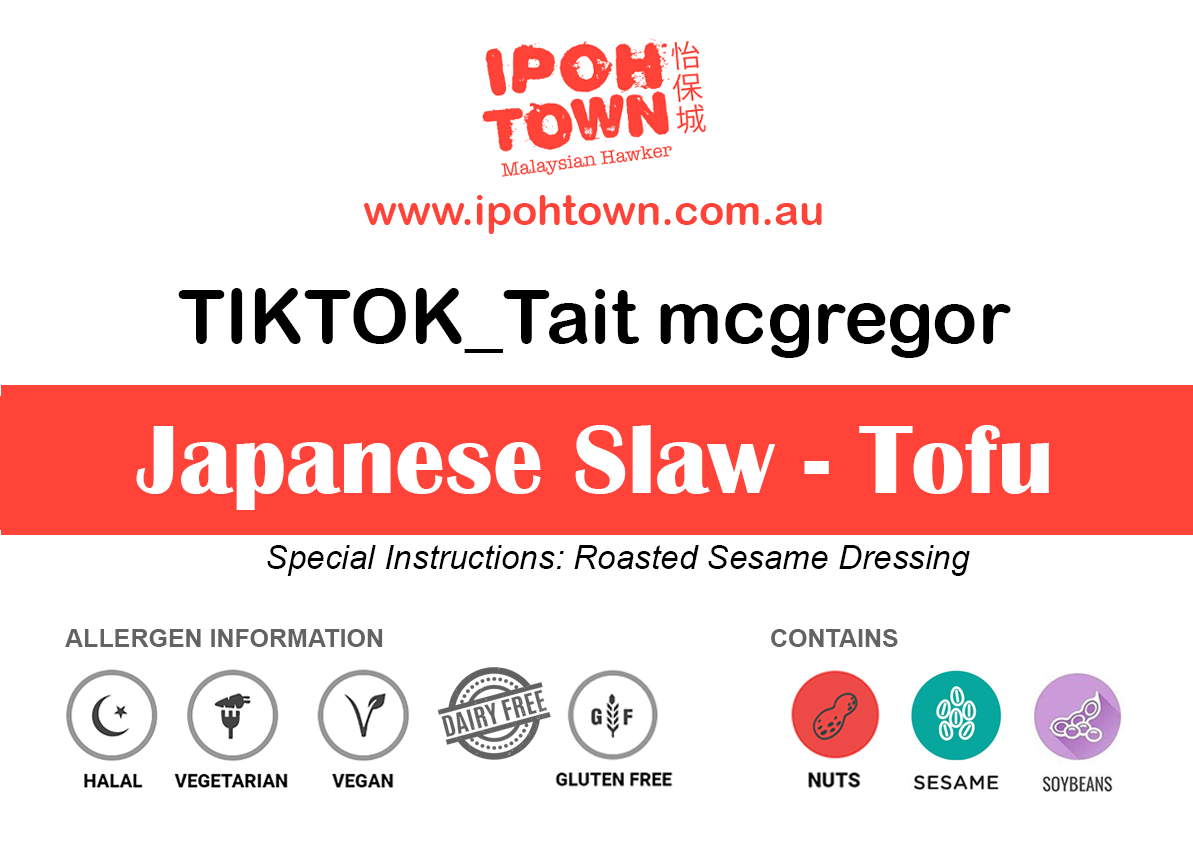
<style>
.page{position:relative;width:1193px;height:850px;background:#ffffff}
.page>*{position:absolute;margin:0}
.t1{font:41.7px "ArialRoundedMTBold";color:#ff4338}
.t2{font:75px "ArialRoundedMTBold";color:#000000}
.t3{font:100px "BritannicBold";color:#ffffff}
.t4{font:33.3px "Arial-ItalicMT";color:#000000}
.t5{font:25px "Arial-BoldMT";color:#636363}
</style>
<div class="page">
<p class="t1" style="left:364px;top:195px;width:458px;height:39px">www.ipohtown.com.au</p>
<p class="t2" style="left:178px;top:288px;width:833px;height:70px">TIKTOK_Tait mcgregor</p>
<p class="t3" style="left:136px;top:425px;width:913px;height:85px">Japanese Slaw - Tofu</p>
<p class="t4" style="left:267px;top:545px;width:703px;height:31px">Special Instructions: Roasted Sesame Dressing</p>
<p class="t5" style="left:65px;top:629px;width:318px;height:18px">ALLERGEN INFORMATION</p>
<p class="t5" style="left:771px;top:629px;width:127px;height:18px">CONTAINS</p>
</div>
